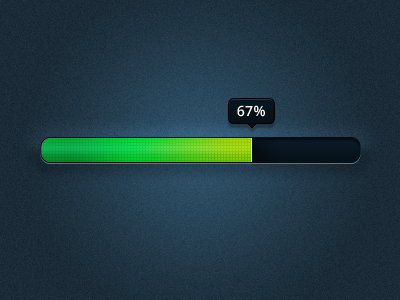
<style>
.page{position:relative;width:400px;height:300px}
.page>*{position:absolute;margin:0}
.t1{font:14px "OpenSans-Semibold";letter-spacing:0.025em;color:#ffffff;text-transform:uppercase}
</style>
<div class="page">
<p class="t1" style="left:237px;top:105px;width:28px;height:12px">67%</p>
</div>
